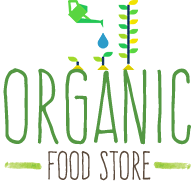
<style>
.page{position:relative;width:194px;height:181px;background:#ffffff}
.page>*{position:absolute;margin:0}
.t1{font:91.7px "FrenteH1-Regular";color:#549843}
</style>
<div class="page">
<p class="t1" style="left:3px;top:68px;width:188px;height:77px">ORGANIC</p>
</div>
